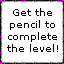
<style>
.page{position:relative;width:64px;height:64px;background:#ffffff}
.page>*{position:absolute;margin:0}
.t1{font:10px "Verdana";color:#000000}
</style>
<div class="page">
<p class="t1" style="left:7px;top:8px;width:51px;height:44px;text-align:center">Get the pencil to complete the level!</p>
</div>
